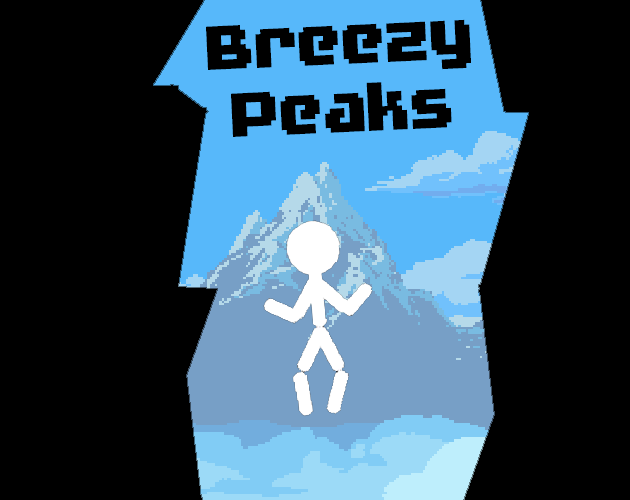
<style>
.page{position:relative;width:630px;height:500px;background:#000000}
.page>*{position:absolute;margin:0}
.t1{font:77.2px/68px "FutilePro";color:#000000}
</style>
<div class="page">
<p class="t1" style="left:206px;top:19px;width:265px;height:118px;text-align:center;rotate:-3deg">Breezy<br>Peaks</p>
</div>
